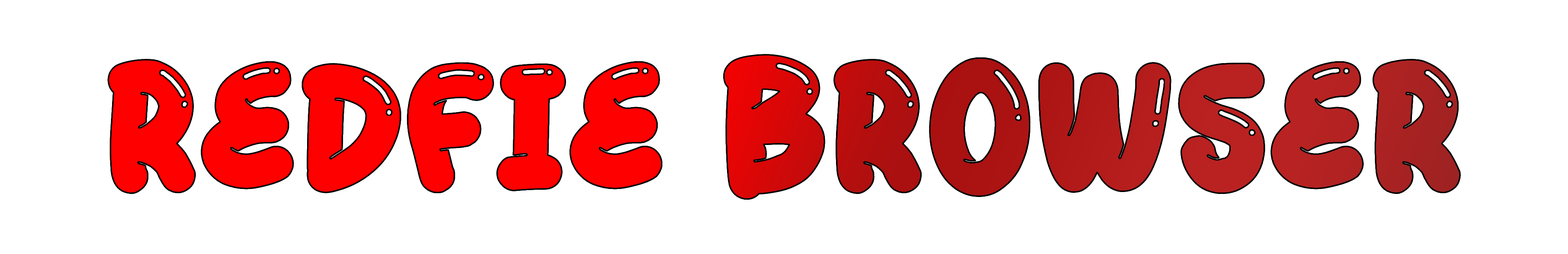
<style>
.page{position:relative;width:1568px;height:254px;background:#ffffff}
.page>*{position:absolute;margin:0}
.t1{font:172.1px "PlaydohRegular"}
</style>
<div class="page">
<p class="t1" style="left:107px;top:54px;width:1354px;height:145px">REDFIE BROWSER</p>
</div>
